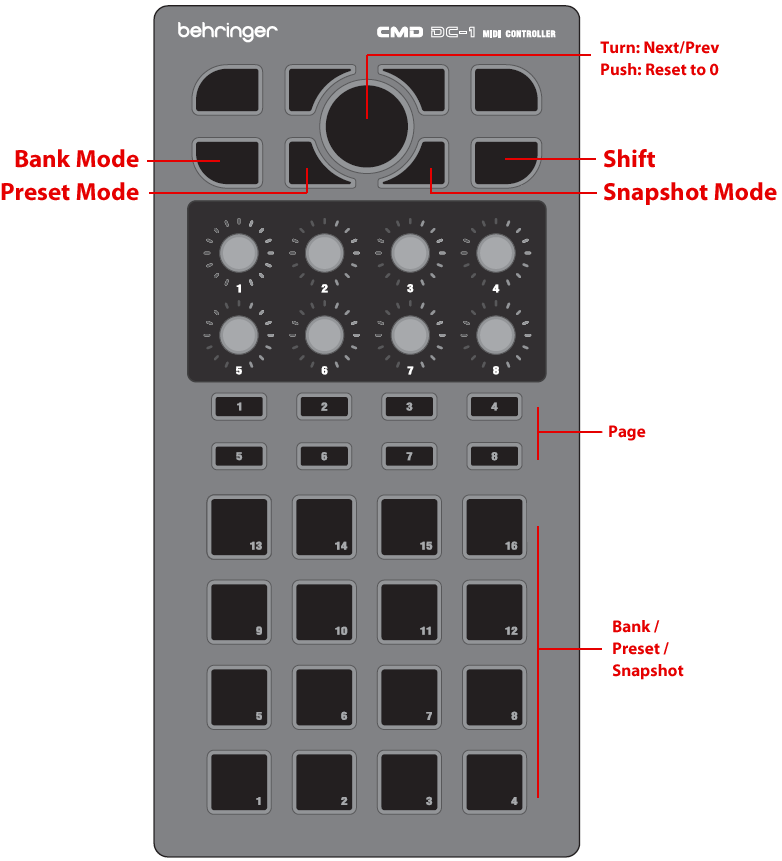
<style>
.page{position:relative;width:782px;height:861px;background:#ffffff}
.page>*{position:absolute;margin:0}
.t1{font:17px/11px "MyriadPro-Bold";color:#e50000}
.t2{font:25px/11px "MyriadPro-Bold";color:#e50000}
.t3{font:17px "MyriadPro-Bold";color:#e50000}
.t4{font:17px/22px "MyriadPro-Bold";color:#e50000}
</style>
<div class="page">
<p class="t1" style="left:600px;top:41px;width:120px;height:35px">Turn: Next/Prev<br><br>Push: Reset to 0</p>
<p class="t2" style="left:1px;top:149px;width:138px;height:52px;text-align:right">Bank Mode<br><br><br>Preset Mode</p>
<p class="t2" style="left:604px;top:149px;width:173px;height:56px">Shift<br><br><br>Snapshot Mode</p>
<p class="t3" style="left:609px;top:425px;width:37px;height:16px">Page</p>
<p class="t4" style="left:612px;top:620px;width:72px;height:60px">Bank /<br>Preset /<br>Snapshot</p>
</div>
